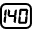
<style>
.page{position:relative;width:32px;height:32px;background:#ffffff}
.page>*{position:absolute;margin:0}
.t1{font:20px "LiquidCrystal";color:#000000}
</style>
<div class="page">
<p class="t1" style="left:3px;top:8px;width:26px;height:16px">140</p>
</div>
